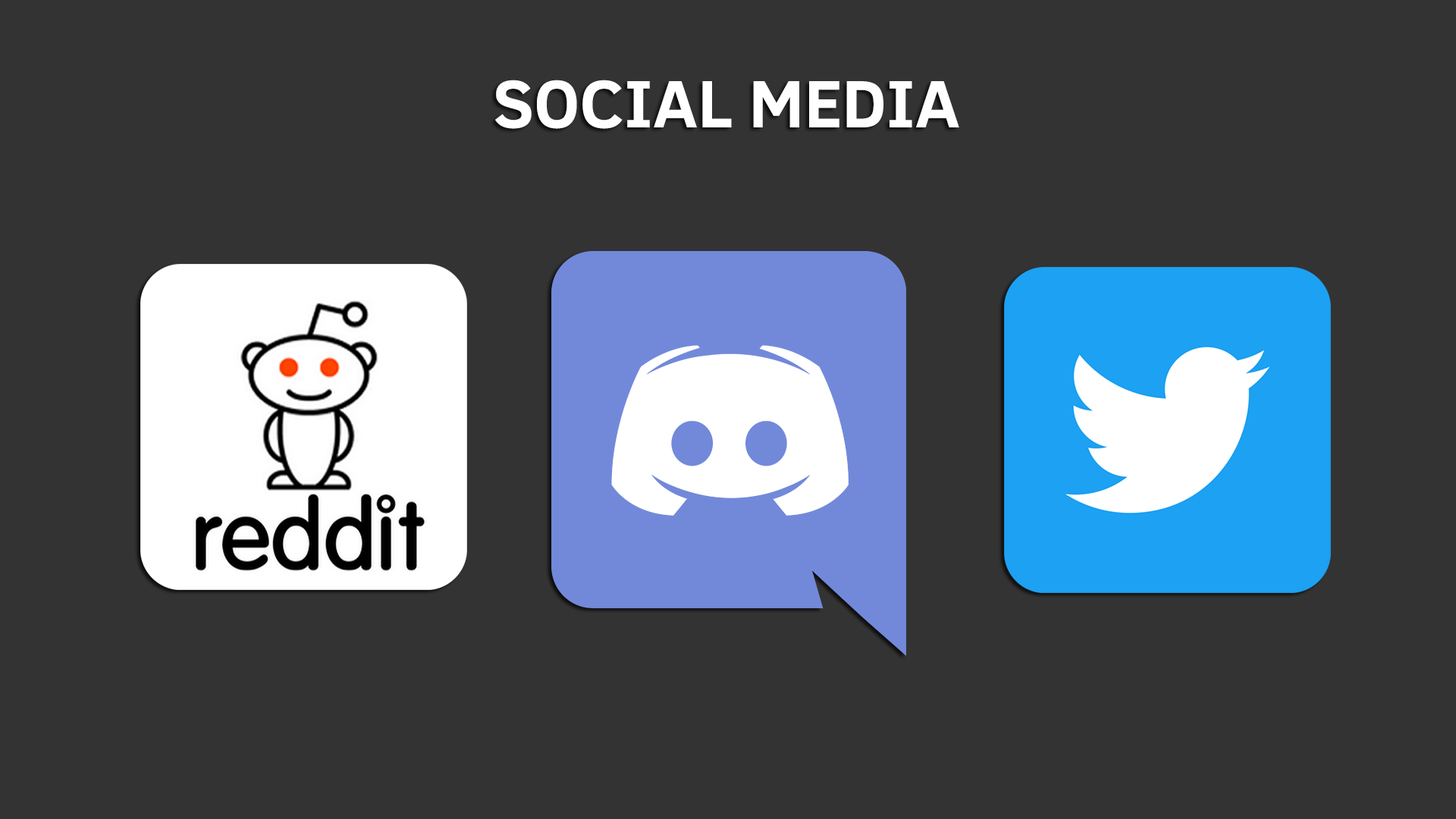
<style>
.page{position:relative;width:1456px;height:819px;background:#333333}
.page>*{position:absolute;margin:0}
.t1{font:68.3px "ClearSans-Bold";color:#ffffff}
</style>
<div class="page">
<p class="t1" style="left:495px;top:80px;width:464px;height:49px">SOCIAL MEDIA</p>
</div>
